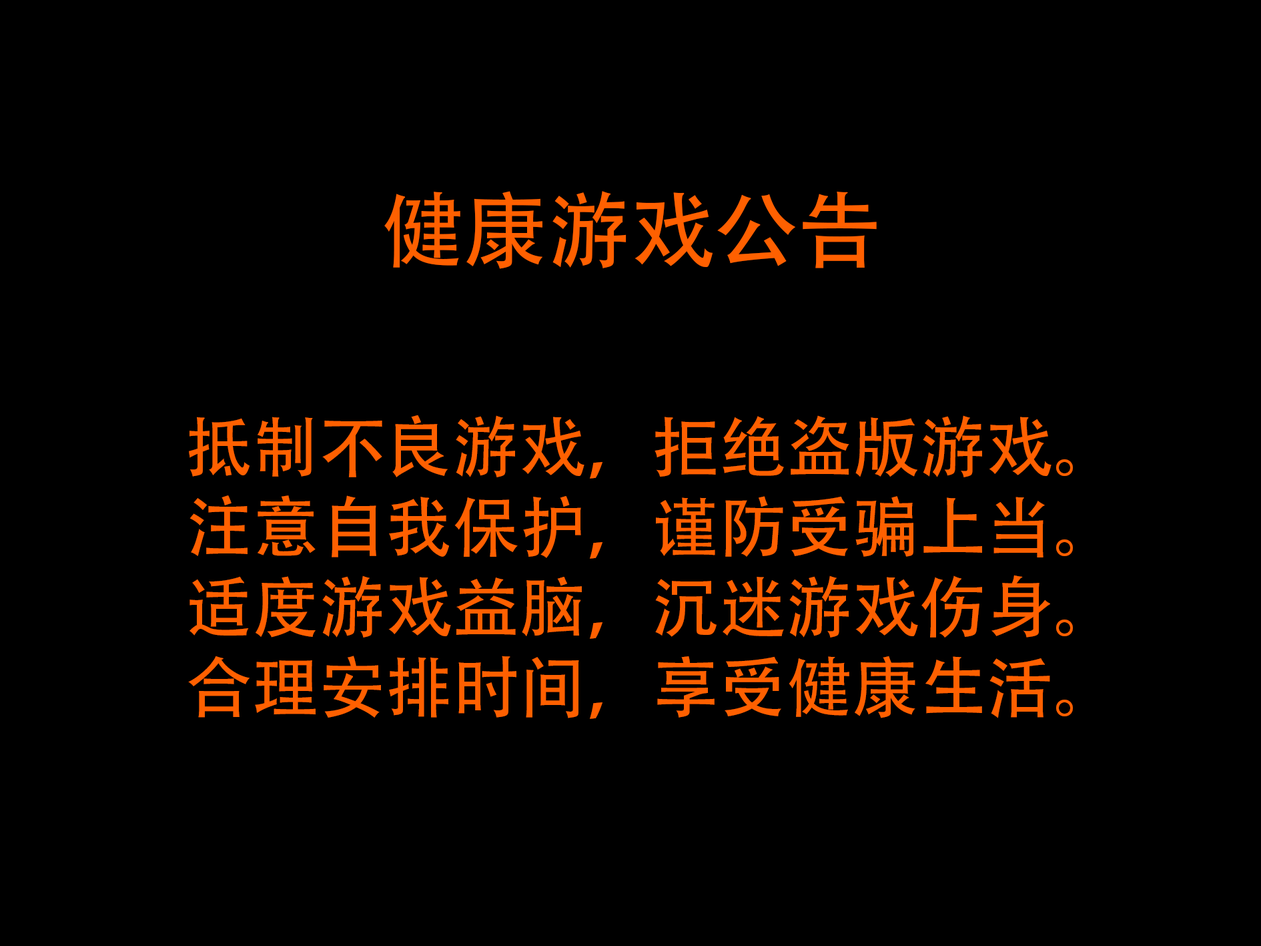
<style>
.page{position:relative;width:1261px;height:946px;background:#000000}
.page>*{position:absolute;margin:0}
.t1{font:83.4px "AdobeHeitiStd-Regular";color:#ff6000}
.t2{font:66.7px "AdobeHeitiStd-Regular";color:#ff6000}
</style>
<div class="page">
<p class="t1" style="left:384px;top:191px;width:493px;height:78px">健康游戏公告</p>
<p class="t2" style="left:188px;top:414px;width:885px;height:305px">抵制不良游戏，拒绝盗版游戏。<br>注意自我保护，谨防受骗上当。<br>适度游戏益脑，沉迷游戏伤身。<br>合理安排时间，享受健康生活。</p>
</div>
